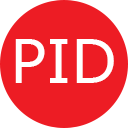
<style>
.page{position:relative;width:128px;height:128px;background:#ed1c24}
.page>*{position:absolute;margin:0}
.t1{font:60px "Verdana";color:#ffffff}
</style>
<div class="page">
<p class="t1" style="left:15px;top:39px;width:99px;height:44px">PID</p>
</div>
